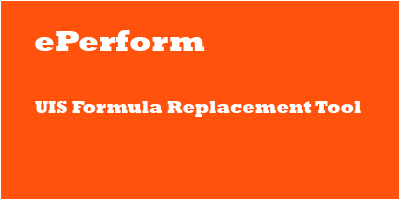
<style>
.page{position:relative;width:400px;height:200px;background:#ff530d}
.page>*{position:absolute;margin:0}
.t1{font:30px "Rockwell-ExtraBold";color:#ffffff}
.t2{font:18px "Rockwell-ExtraBold";color:#ffffff}
</style>
<div class="page">
<p class="t1" style="left:35px;top:30px;width:170px;height:21px">ePerform</p>
<p class="t2" style="left:35px;top:101px;width:326px;height:16px">UIS Formula Replacement Tool</p>
</div>
